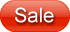
<style>
.page{position:relative;width:70px;height:32px}
.page>*{position:absolute;margin:0}
.t1{font:20px "ArialMT";color:#ffffff}
</style>
<div class="page">
<p class="t1" style="left:14px;top:5px;width:40px;height:24px">Sale</p>
</div>
